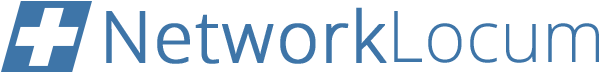
<style>
.page{position:relative;width:605px;height:74px;background:#ffffff}
.page>*{position:absolute;margin:0}
.t1{font:71.6px "OpenSans-Light";letter-spacing:0.01em;color:#3e75a8;font-weight:bold}
.t2{font:71.6px "OpenSans-Light";color:#3e75a8}
</style>
<div class="page">
<p class="t1" style="left:106px;top:7px;width:493px;height:57px">Network<span class="t2">Locum</span></p>
</div>
